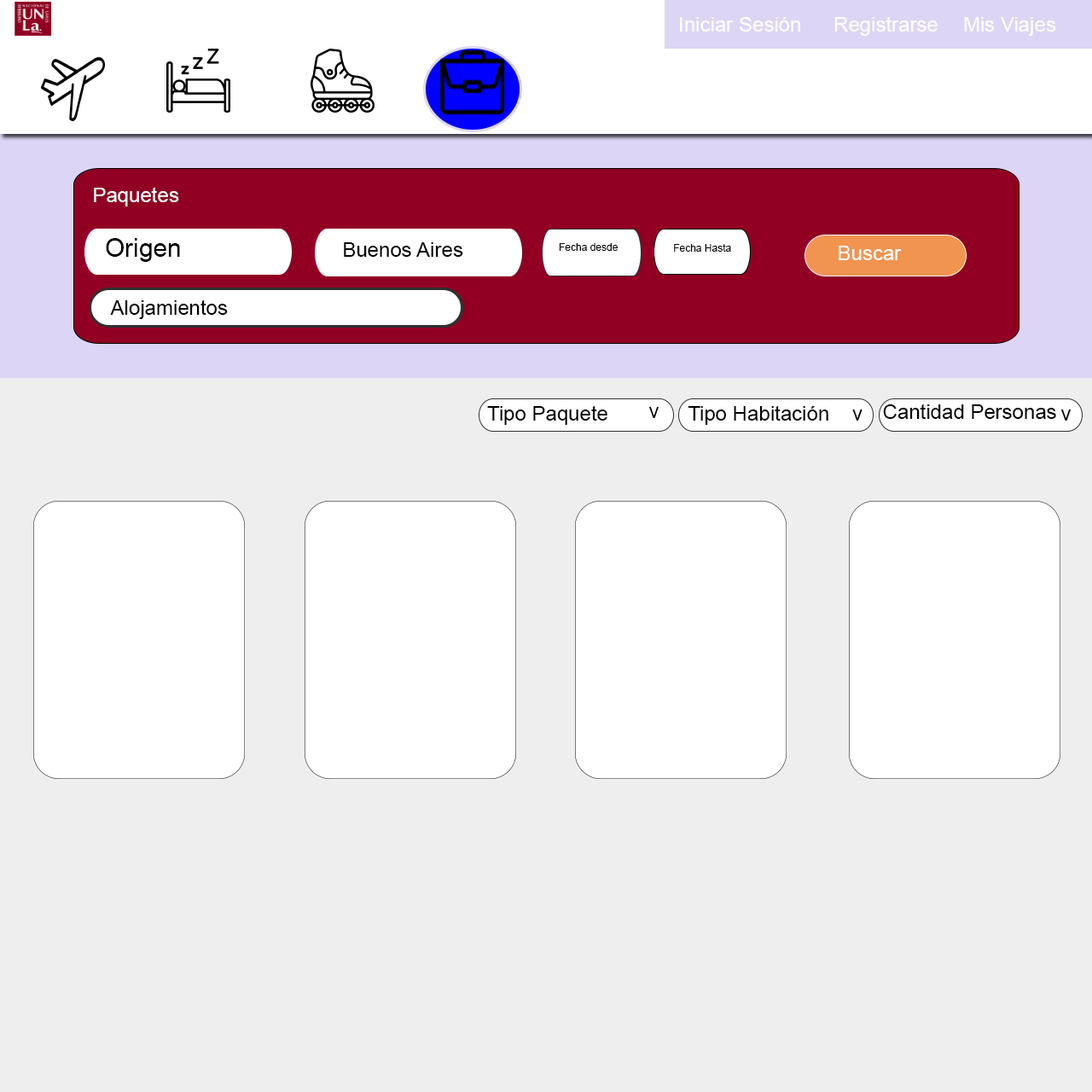
<style>
.page{position:relative;width:1092px;height:1092px;background:#eeeeee}
.page>*{position:absolute;margin:0}
.t1{font:20.5px "ArialMT";color:#ffffff}
.t2{font:25.6px "ArialMT";color:#000000}
.t3{font:20.5px "ArialMT";color:#000000}
.t4{font:10.2px "ArialMT";color:#000000}
</style>
<div class="page">
<p class="t1" style="left:680px;top:17px;width:120px;height:15px">Iniciar Sesión</p>
<p class="t1" style="left:834px;top:16px;width:104px;height:20px">Registrarse</p>
<p class="t1" style="left:964px;top:17px;width:92px;height:19px">Mis Viajes</p>
<p class="t1" style="left:94px;top:187px;width:85px;height:19px">Paquetes</p>
<p class="t2" style="left:106px;top:238px;width:74px;height:24px">Origen</p>
<p class="t3" style="left:344px;top:242px;width:119px;height:15px">Buenos Aires</p>
<p class="t4" style="left:559px;top:243px;width:59px;height:8px">Fecha desde</p>
<p class="t4" style="left:674px;top:244px;width:57px;height:8px">Fecha Hasta</p>
<p class="t1" style="left:839px;top:246px;width:63px;height:14px">Buscar</p>
<p class="t3" style="left:110px;top:299px;width:118px;height:20px">Alojamientos</p>
<p class="t3" style="left:487px;top:405px;width:120px;height:20px">Tipo Paquete</p>
<p class="t3" style="left:648px;top:407px;width:11px;height:11px">v</p>
<p class="t3" style="left:688px;top:405px;width:174px;height:20px">Tipo Habitación    v</p>
<p class="t3" style="left:883px;top:404px;width:173px;height:15px">Cantidad Personas</p>
<p class="t3" style="left:1060px;top:409px;width:12px;height:12px">v</p>
</div>
